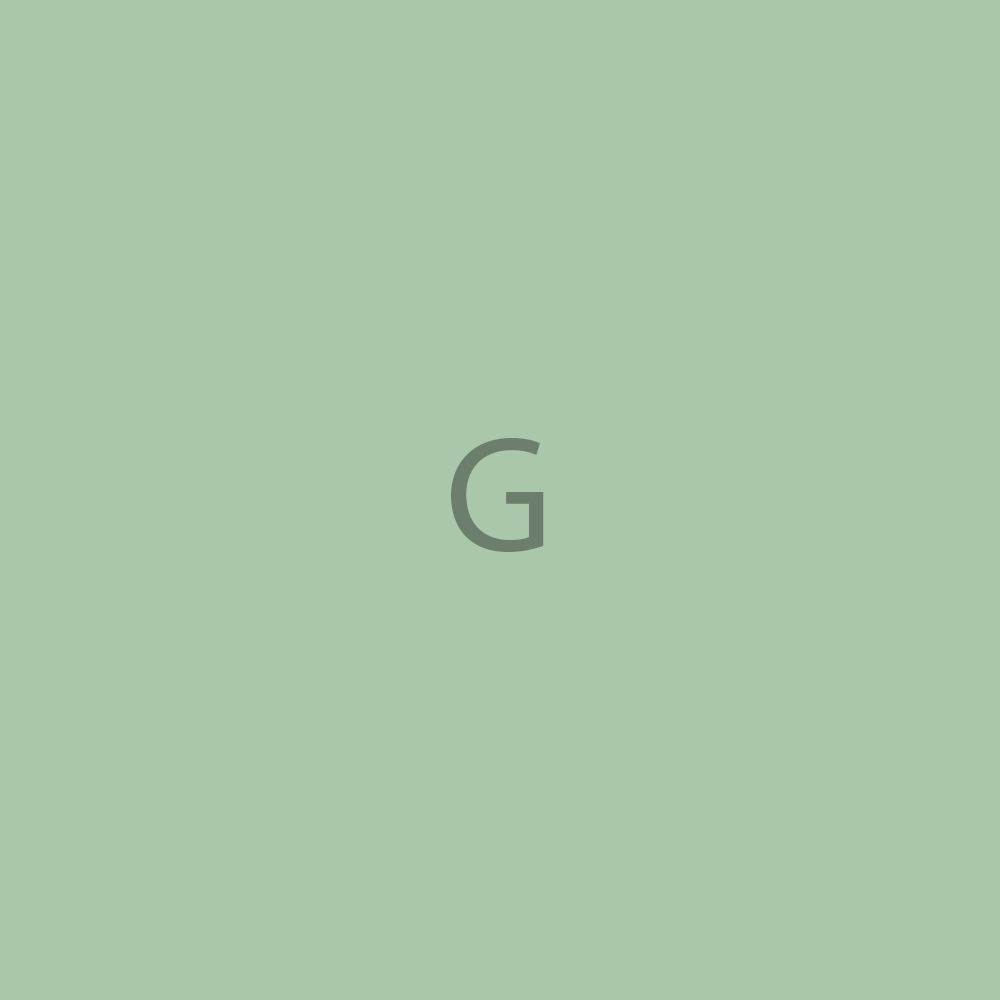
<style>
.page{position:relative;width:1000px;height:1000px;background:#abc7ab}
.page>*{position:absolute;margin:0}
.t1{font:166.7px "MyriadPro-Regular";color:#6c7e6c}
</style>
<div class="page">
<p class="t1" style="left:451px;top:437px;width:93px;height:115px">G</p>
</div>
